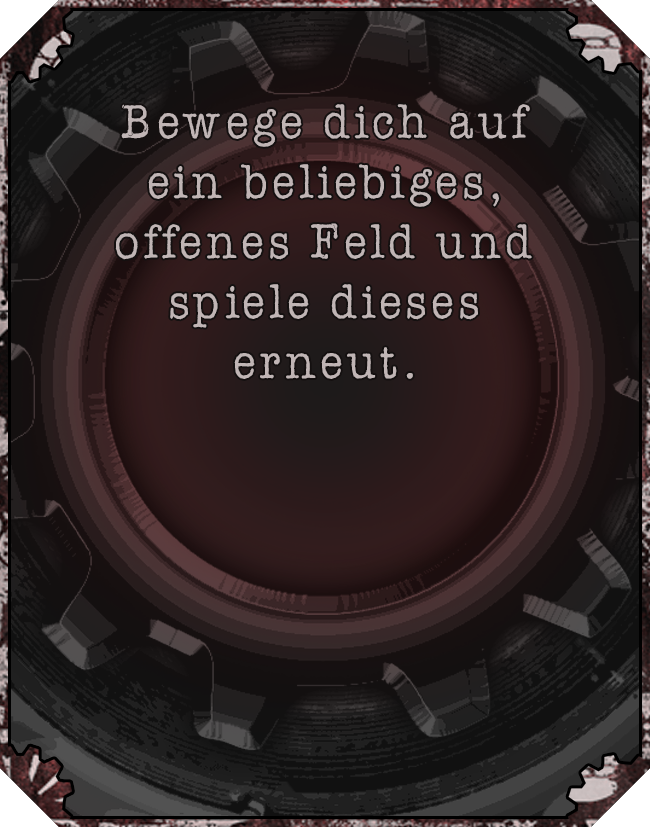
<style>
.page{position:relative;width:650px;height:827px}
.page>*{position:absolute;margin:0}
.t1{font:50px "AmerTypewriterITCbyBT-Medium";letter-spacing:0.02em;color:#c0b5b5}
</style>
<div class="page">
<p class="t1" style="left:115px;top:104px;width:417px;height:275px;text-align:center">Bewege dich auf ein beliebiges, offenes Feld und spiele dieses erneut.</p>
</div>
